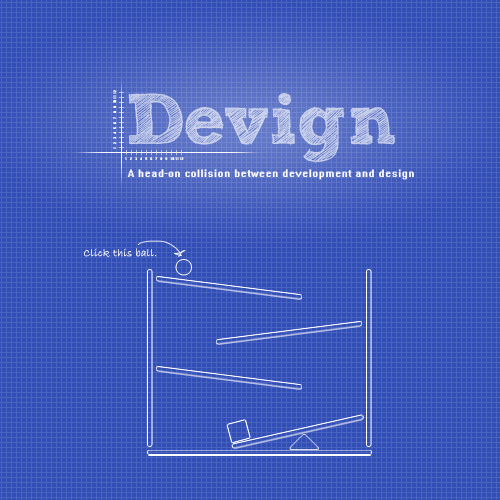
<style>
.page{position:relative;width:500px;height:500px;background:#314db6}
.page>*{position:absolute;margin:0}
.t1{font:72px "freeversionSketchBlock-Bold";letter-spacing:0.005em;color:#c8d0eb}
.t2{font:72px "freeversionSketchBlock-Bold";letter-spacing:-0.04em;color:#c8d0eb}
.t3{font:10px "System";letter-spacing:0.035em;color:#ffffff}
.t4{font:11px "BradleyHandITC";letter-spacing:0.035em;color:#ffffff}
</style>
<div class="page">
<p class="t1" style="left:128px;top:93px;width:268px;height:70px"><span class="t2">De</span>vign</p>
<p class="t3" style="left:127px;top:169px;width:287px;height:11px">A head-on collision between development and design</p>
<p class="t4" style="left:83px;top:248px;width:74px;height:9px">Click this ball.</p>
</div>
